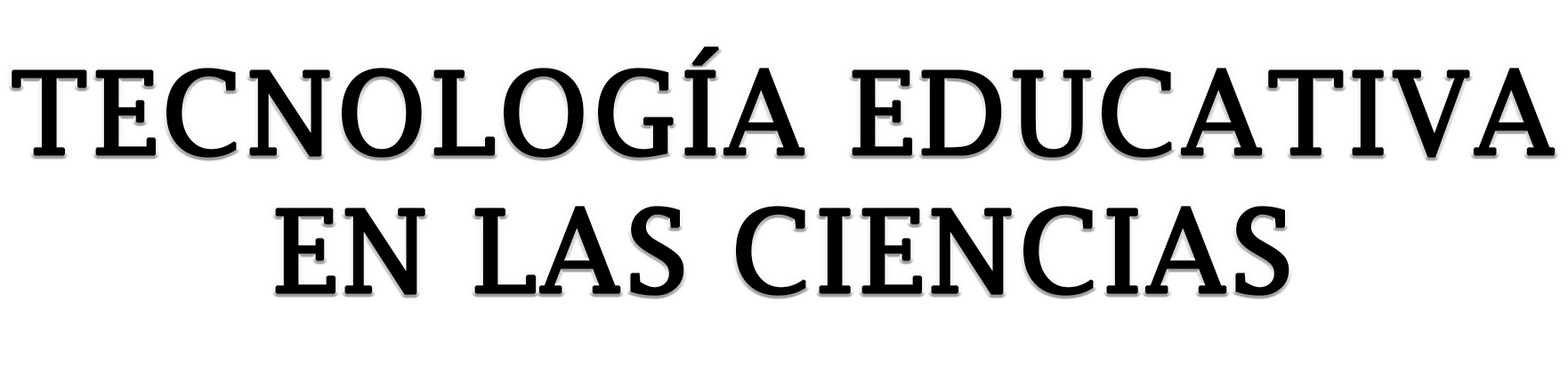
<style>
.page{position:relative;width:1568px;height:368px;background:#ffffff}
.page>*{position:absolute;margin:0}
.t1{font:114.9px "LucidaFax";color:#000000;font-weight:bold}
</style>
<div class="page">
<p class="t1" style="left:12px;top:46px;width:1544px;height:249px;text-align:center">TECNOLOGÍA EDUCATIVA EN LAS CIENCIAS</p>
</div>
